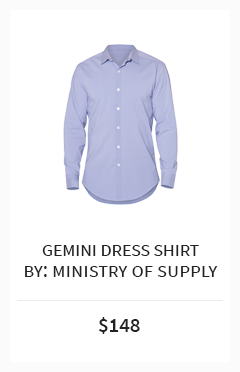
<style>
.page{position:relative;width:240px;height:372px;background:#ffffff}
.page>*{position:absolute;margin:0}
.t1{font:20.8px "SourceSansPro-Regular";letter-spacing:-0.025em;color:#232323;font-variant:small-caps}
.t2{font:20.8px "SourceSansPro-Regular";color:#232323;font-variant:small-caps}
.t3{font:20.6px "SourceSansPro-Semibold";color:#232323}
</style>
<div class="page">
<p class="t1" style="left:42px;top:245px;width:157px;height:11px">gemini dress shirt</p>
<p class="t2" style="left:25px;top:266px;width:193px;height:11px">by: ministry of supply</p>
<p class="t3" style="left:98px;top:317px;width:42px;height:17px">$148</p>
</div>
